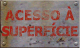
<style>
.page{position:relative;width:80px;height:48px}
.page>*{position:absolute;margin:0}
.t1{font:13.3px/16px "Tahoma-Bold";letter-spacing:-0.04em}
.t2{font:13.3px/16px "Tahoma-Bold";letter-spacing:0.04em}
</style>
<div class="page">
<p class="t1" style="left:2px;top:6px;width:76px;height:31px;text-align:center"><span class="t2">ACESSO À<br></span>SUPERFÍCIE</p>
</div>
